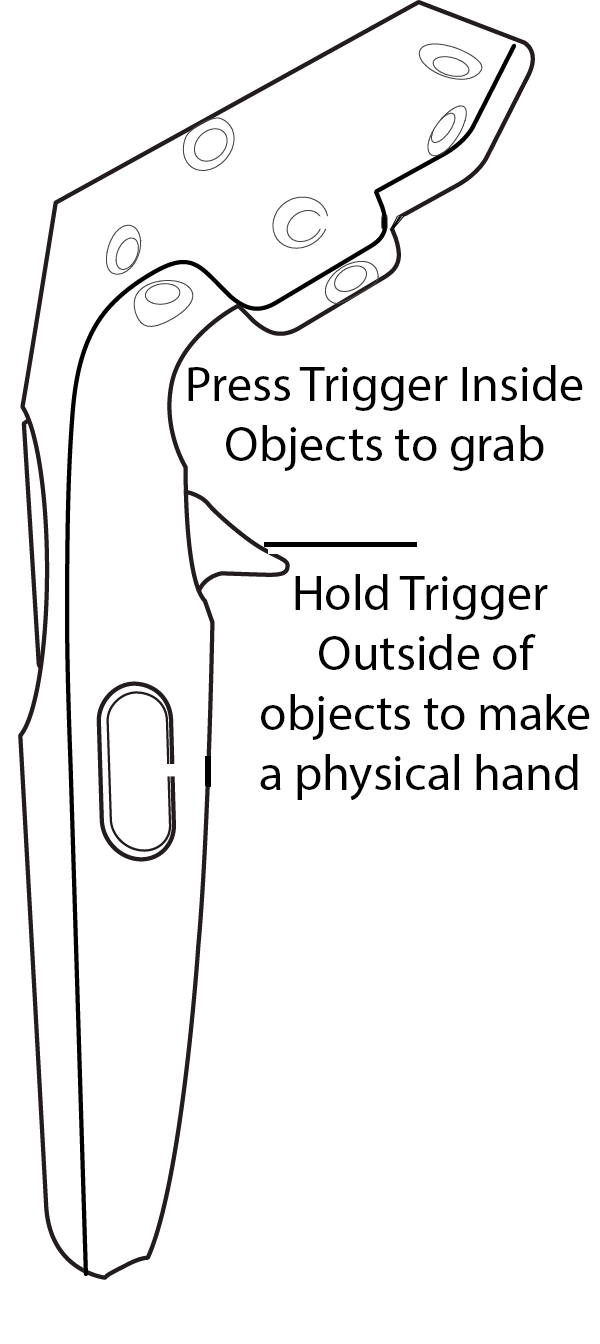
<style>
.page{position:relative;width:600px;height:1344px;background:#ffffff}
.page>*{position:absolute;margin:0}
.t1{font:12px "MyriadPro-Regular";color:#000000}
</style>
<div class="page">
<p class="t1" style="left:188px;top:365px;width:395px;height:106px;text-align:center">Press Trigger Inside <br>Objects to grab</p>
<p class="t1" style="left:260px;top:574px;width:330px;height:227px;text-align:center">Hold Trigger<br> Outside of<br> objects to make<br> a physical hand</p>
</div>
